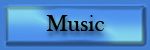
<style>
.page{position:relative;width:150px;height:50px}
.page>*{position:absolute;margin:0}
.t1{font:24px "BaskOldFace";letter-spacing:0.002em;color:#000000}
</style>
<div class="page">
<p class="t1" style="left:46px;top:15px;width:58px;height:16px">Music</p>
</div>
